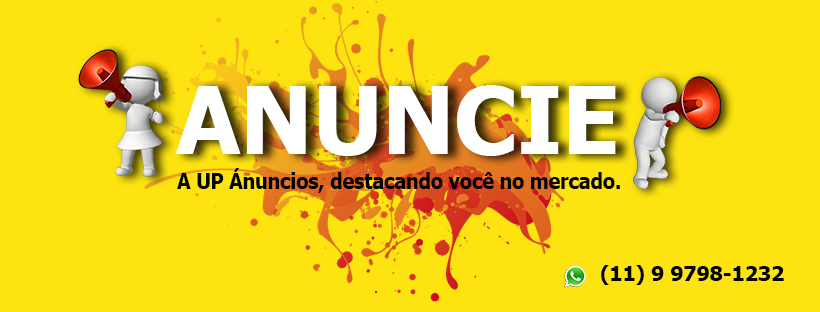
<style>
.page{position:relative;width:820px;height:312px;background:#fde310}
.page>*{position:absolute;margin:0}
.t1{font:93.6px "Tahoma-Bold";color:#ffffff}
.t2{font:20.6px "Tahoma-Bold";color:#000000;scale:0.95 1}
.t3{font:20.4px "Tahoma-Bold";color:#000000}
</style>
<div class="page">
<p class="t1" style="left:175px;top:85px;width:441px;height:71px">ANUNCIE</p>
<p class="t2" style="left:177px;top:168px;width:443px;height:25px">A UP Ánuncios, destacando você no mercado.</p>
<p class="t3" style="left:601px;top:265px;width:183px;height:20px">(11) 9 9798-1232</p>
</div>
